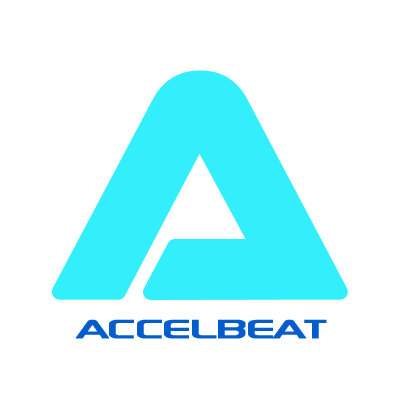
<style>
.page{position:relative;width:400px;height:400px;background:#ffffff}
.page>*{position:absolute;margin:0}
.t1{font:25.8px "Modaerne";letter-spacing:-0.05em;color:#035dcc;text-transform:uppercase;font-weight:bold;scale:2 1}
</style>
<div class="page">
<p class="t1" style="left:75px;top:319px;width:252px;height:20px">AccelBeat</p>
</div>
